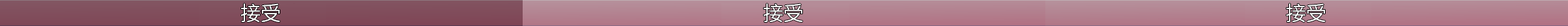
<style>
.page{position:relative;width:1568px;height:26px}
.page>*{position:absolute;margin:0}
.t1{font:20.6px "SourceHanSansSC-Normal";color:#ffffff}
</style>
<div class="page">
<p class="t1" style="left:240px;top:3px;width:40px;height:20px">接受</p>
<p class="t1" style="left:763px;top:3px;width:40px;height:20px">接受</p>
<p class="t1" style="left:1286px;top:3px;width:40px;height:20px">接受</p>
</div>
